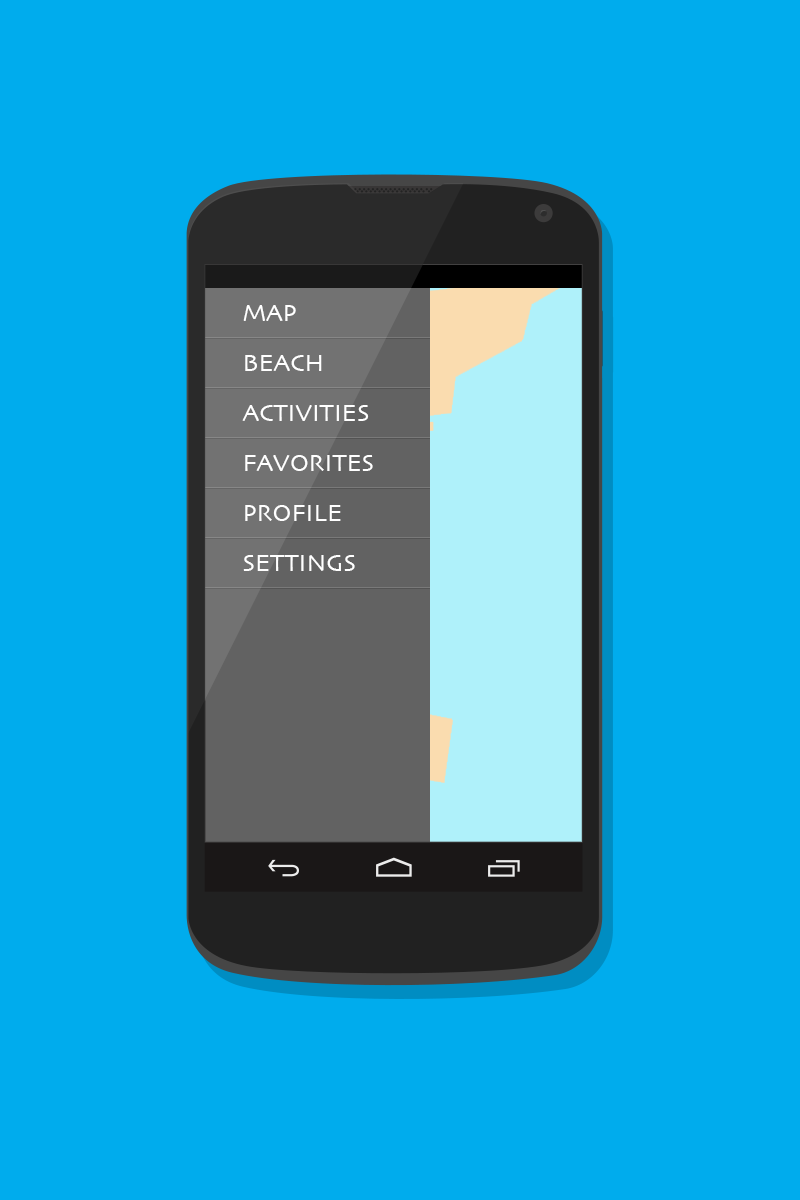
<style>
.page{position:relative;width:800px;height:1200px;background:#00aced}
.page>*{position:absolute;margin:0}
.t1{font:25px "Skia-Regular";color:#ffffff}
</style>
<div class="page">
<p class="t1" style="left:243px;top:305px;width:53px;height:16px">MAP</p>
<p class="t1" style="left:245px;top:355px;width:77px;height:16px">BEACH</p>
<p class="t1" style="left:242px;top:405px;width:127px;height:16px">ACTIVITIES</p>
<p class="t1" style="left:245px;top:455px;width:128px;height:16px">FAVORITES</p>
<p class="t1" style="left:245px;top:505px;width:96px;height:16px">PROFILE</p>
<p class="t1" style="left:243px;top:555px;width:112px;height:16px">SETTINGS</p>
</div>
